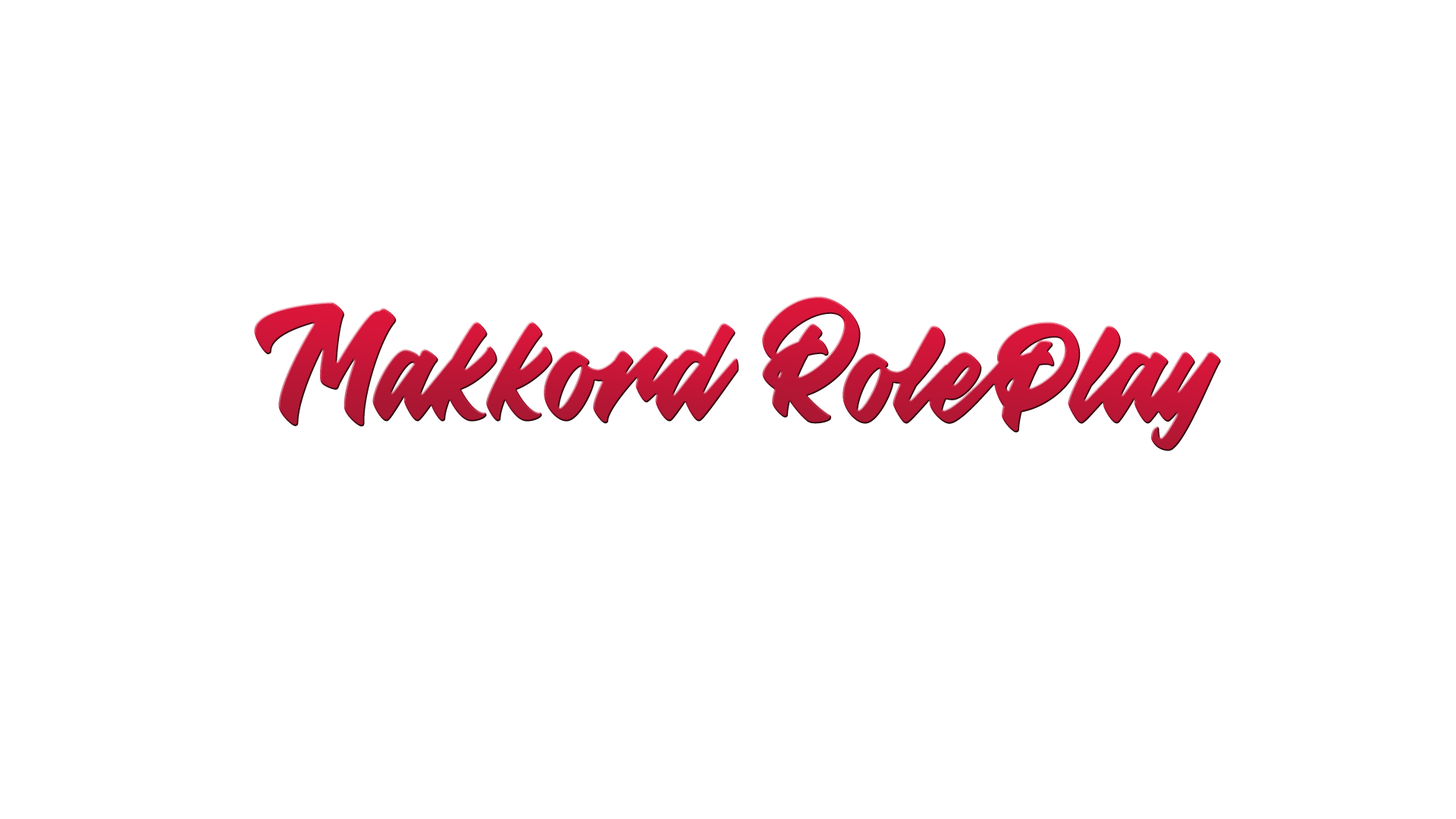
<style>
.page{position:relative;width:1456px;height:819px;background:#ffffff}
.page>*{position:absolute;margin:0}
.t1{font:166.8px "Kalulla-Regular";color:#cb1638;font-weight:bold}
.t2{font:166.8px "Kalulla-Regular";color:#c51637;font-weight:bold}
.t3{font:136.5px "Kalulla-Regular";color:#be1636;font-weight:bold}
.t4{font:136.5px "Kalulla-Regular";color:#c51637;font-weight:bold}
</style>
<div class="page">
<p class="t1" style="left:254px;top:302px;width:143px;height:125px">M</p>
<p class="t2" style="left:762px;top:297px;width:99px;height:127px">R</p>
<p class="t3" style="left:372px;top:322px;width:367px;height:102px">akkord</p>
<p class="t4" style="left:842px;top:322px;width:379px;height:129px">olePlay</p>
</div>
